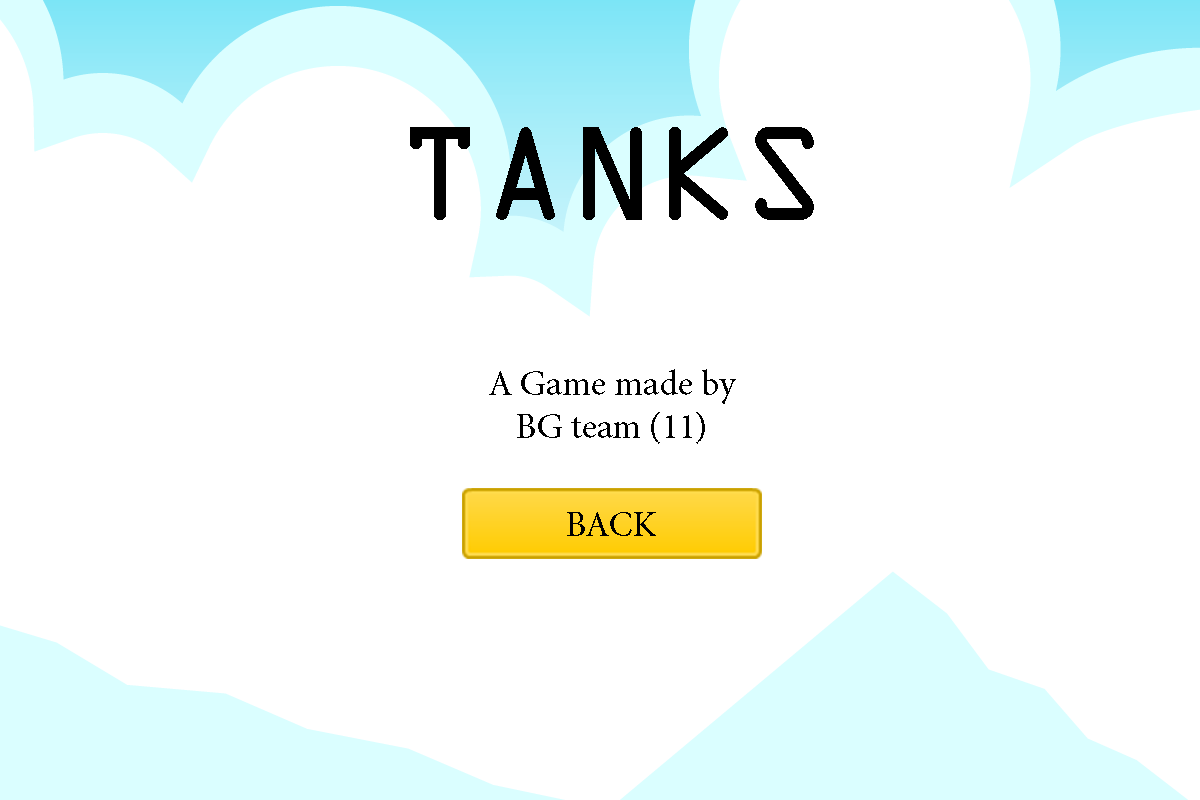
<style>
.page{position:relative;width:1200px;height:800px;background:#ffffff}
.page>*{position:absolute;margin:0}
.t1{font:120px "OCRAStd";color:#000000}
.t2{font:36px "MinionPro-Regular";color:#000000}
</style>
<div class="page">
<p class="t1" style="left:410px;top:127px;width:404px;height:93px">TANKS</p>
<p class="t2" style="left:489px;top:369px;width:247px;height:75px;text-align:center">A Game made by<br>BG team (11)</p>
<p class="t2" style="left:567px;top:512px;width:89px;height:24px">BACK</p>
</div>
